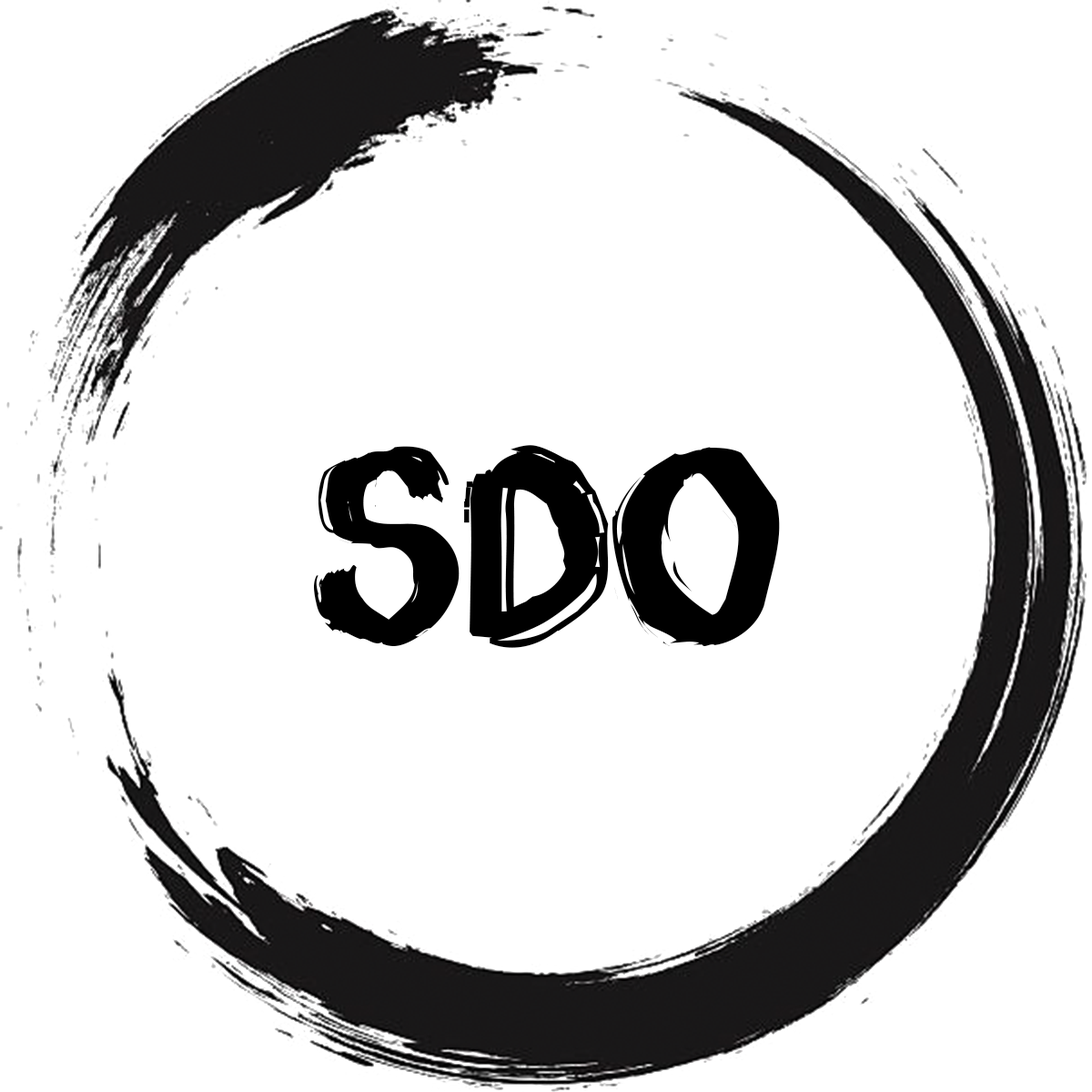
<style>
.page{position:relative;width:1092px;height:1092px;background:#ffffff}
.page>*{position:absolute;margin:0}
.t1{font:248.6px "appopaint-Regular";color:#000000}
</style>
<div class="page">
<p class="t1" style="left:314px;top:445px;width:466px;height:203px">SDO</p>
</div>
